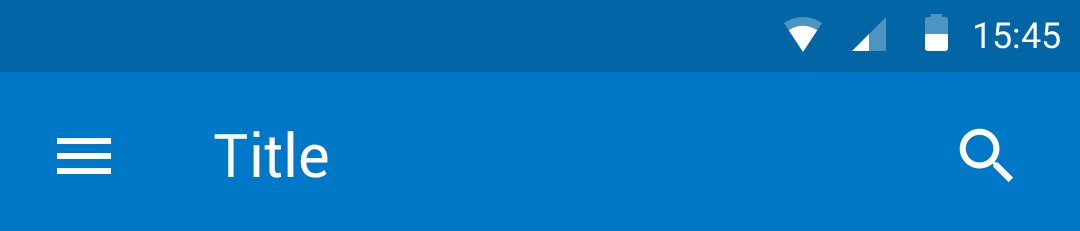
<style>
.page{position:relative;width:1080px;height:231px;background:#0078c8}
.page>*{position:absolute;margin:0}
.t1{font:36px "Roboto-Regular";color:#ffffff}
.t2{font:60px "Roboto-Regular";color:#ffffff}
</style>
<div class="page">
<p class="t1" style="left:975px;top:22px;width:85px;height:27px">15:45</p>
<p class="t2" style="left:214px;top:131px;width:114px;height:47px">Title</p>
</div>
